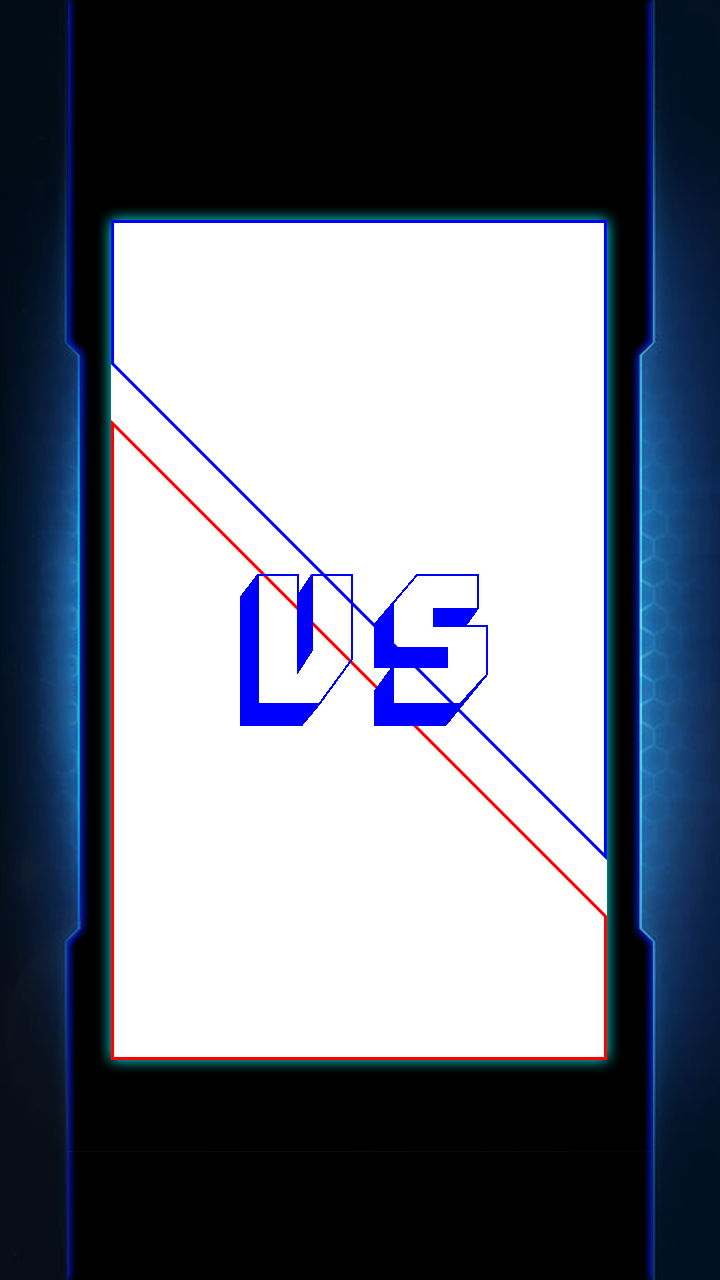
<style>
.page{position:relative;width:720px;height:1280px;background:#ffffff}
.page>*{position:absolute;margin:0}
.t1{font:180px "VNPionia";letter-spacing:0.05em;color:#0000ff}
</style>
<div class="page">
<p class="t1" style="left:240px;top:574px;width:248px;height:152px">VS</p>
</div>
